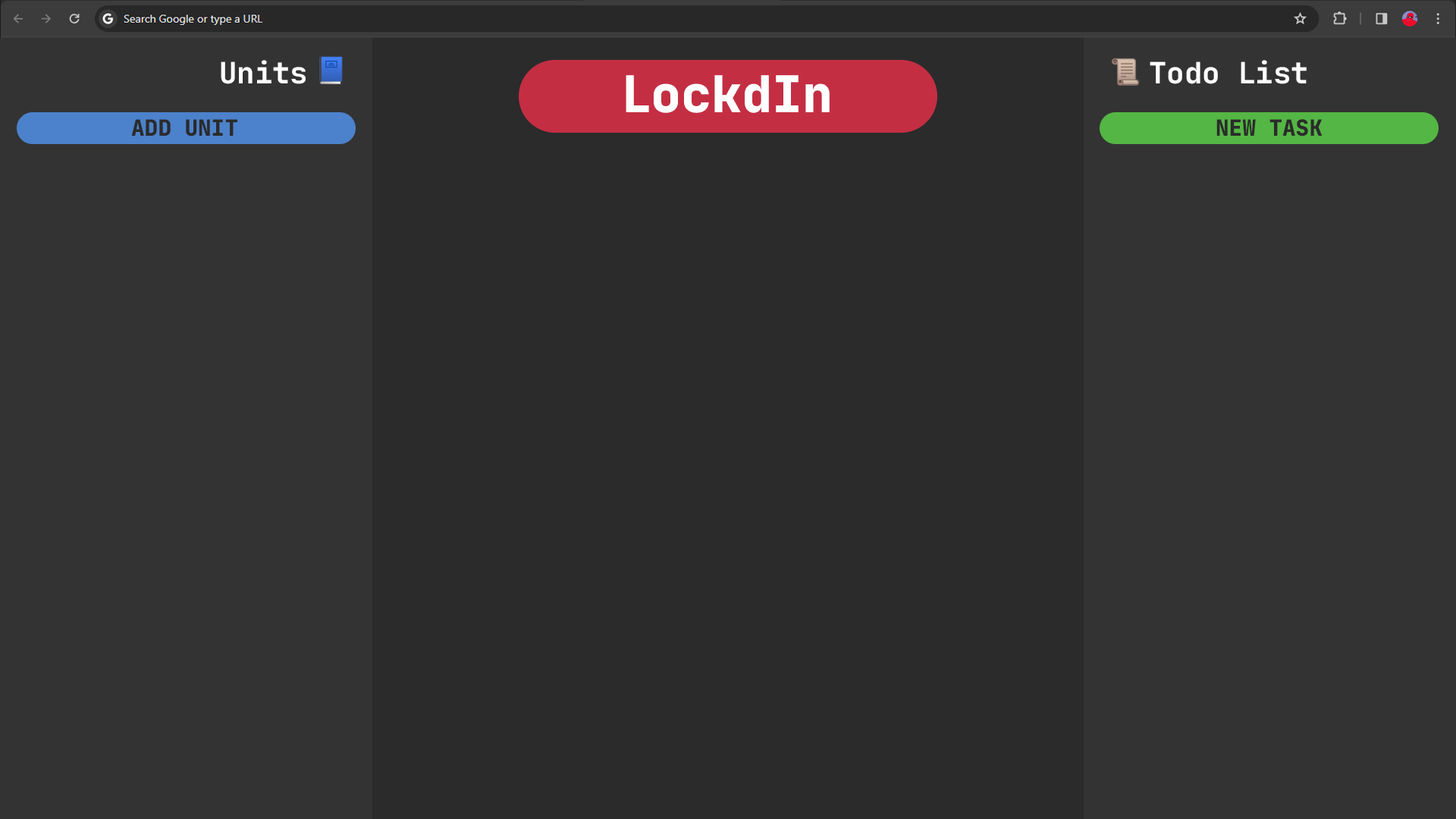
<style>
.page{position:relative;width:1456px;height:819px;background:#333333}
.page>*{position:absolute;margin:0}
.t1{font:29.6px "JetBrainsMono-Bold";color:#ffffff}
.t2{font:50.7px "JetBrainsMono-ExtraBold";color:#ffffff}
.t3{font:22.3px "JetBrainsMono-ExtraBold";color:#2b2b2b}
</style>
<div class="page">
<p class="t1" style="left:221px;top:60px;width:85px;height:24px">Units</p>
<p class="t1" style="left:1150px;top:60px;width:157px;height:24px">Todo List</p>
<p class="t2" style="left:626px;top:75px;width:204px;height:38px">LockdIn</p>
<p class="t3" style="left:131px;top:119px;width:106px;height:17px">ADD UNIT</p>
<p class="t3" style="left:1216px;top:119px;width:107px;height:17px">NEW TASK</p>
</div>
